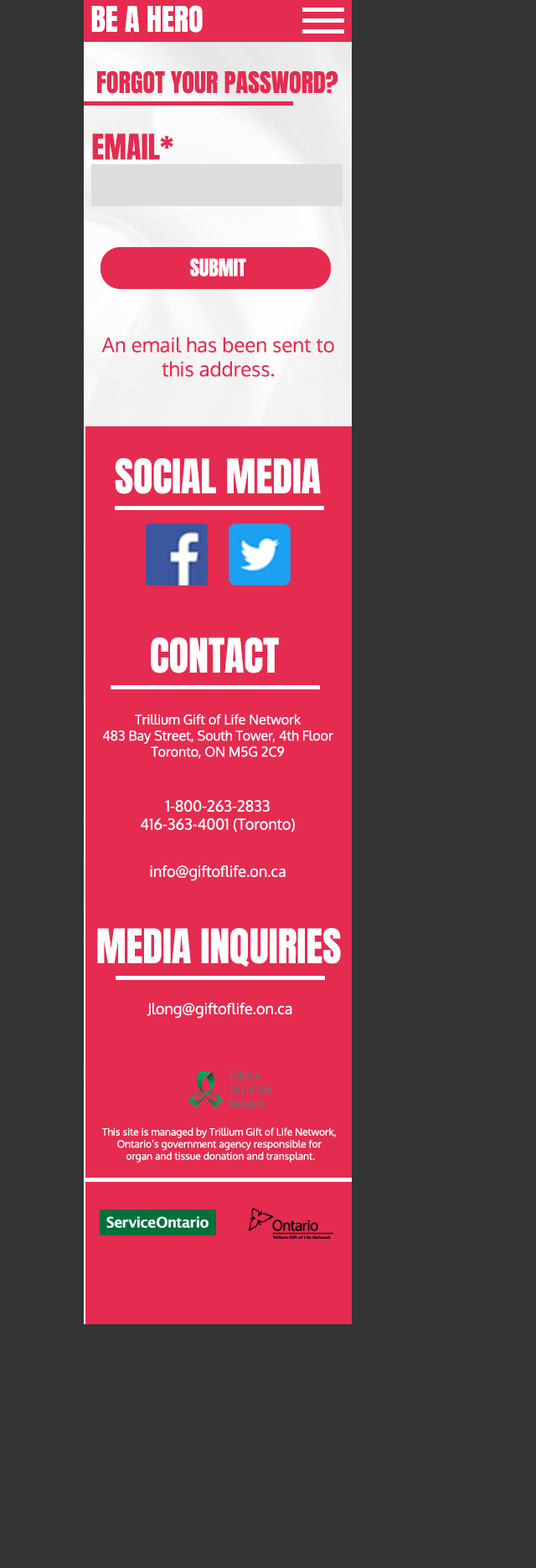
<style>
.page{position:relative;width:536px;height:1568px;background:#333333}
.page>*{position:absolute;margin:0}
.t1{font:30.2px "Anton-Regular";color:#ffffff}
.t2{font:25.1px "Anton-Regular";color:#e52b50}
.t3{font:30.2px "Anton-Regular";color:#e52b50}
.t4{font:20.1px "Anton-Regular";color:#ffffff}
.t5{font:20.1px "Oxygen-Regular";color:#e52b50}
.t6{font:40.2px "Anton-Regular";color:#ffffff}
.t7{font:13.4px "Oxygen-Regular";color:#ffffff}
.t8{font:15.1px "Oxygen-Regular";color:#ffffff}
.t9{font:10.1px "Oxygen-Regular";color:#ffffff}
</style>
<div class="page">
<p class="t1" style="left:91px;top:5px;width:112px;height:28px">BE A HERO</p>
<p class="t2" style="left:97px;top:70px;width:241px;height:24px">FORGOT YOUR PASSWORD?</p>
<p class="t3" style="left:92px;top:133px;width:81px;height:27px">EMAIL*</p>
<p class="t4" style="left:190px;top:258px;width:56px;height:18px">SUBMIT</p>
<p class="t5" style="left:101px;top:337px;width:233px;height:40px;text-align:center">An email has been sent to<br>this address.</p>
<p class="t6" style="left:115px;top:458px;width:206px;height:36px">SOCIAL MEDIA</p>
<p class="t6" style="left:151px;top:637px;width:128px;height:36px">CONTACT</p>
<p class="t7" style="left:103px;top:714px;width:230px;height:45px;text-align:center">Trillium Gift of Life Network<br>483 Bay Street, South Tower, 4th Floor<br>Toronto, ON M5G 2C9</p>
<p class="t8" style="left:141px;top:800px;width:154px;height:32px;text-align:center">1-800-263-2833<br>416-363-4001 (Toronto)</p>
<p class="t8" style="left:150px;top:865px;width:136px;height:16px">info@giftoflife.on.ca</p>
<p class="t6" style="left:97px;top:928px;width:244px;height:39px">MEDIA INQUIRIES</p>
<p class="t8" style="left:147px;top:1003px;width:145px;height:16px">Jlong@giftoflife.on.ca</p>
<p class="t9" style="left:102px;top:1127px;width:234px;height:36px;text-align:center">This site is managed by Trillium Gift of Life Network, <br>Ontario’s government agency responsible for <br>organ and tissue donation and transplant.</p>
</div>
